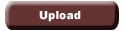
<style>
.page{position:relative;width:124px;height:31px;background:#663333}
.page>*{position:absolute;margin:0}
.t1{font:11px "Arial-Black";color:#ffffff}
</style>
<div class="page">
<p class="t1" style="left:39px;top:11px;width:42px;height:11px">Upload</p>
</div>
